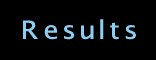
<style>
.page{position:relative;width:156px;height:60px;background:#000000}
.page>*{position:absolute;margin:0}
.t1{font:25px "LucidaSansUnicode";letter-spacing:0.26em;color:#8dcff4;scale:1.11 1}
</style>
<div class="page">
<p class="t1" style="left:23px;top:19px;width:113px;height:21px">Results</p>
</div>
